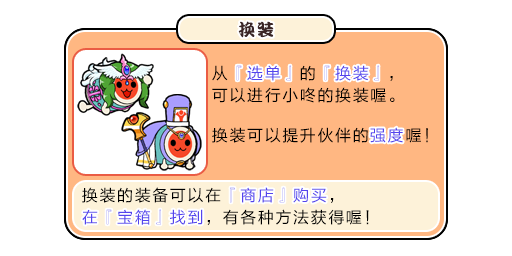
<style>
.page{position:relative;width:512px;height:256px;background:#ffffff}
.page>*{position:absolute;margin:0}
.t1{font:17px "DFPKanTingLiuW9";letter-spacing:0.1em;color:#3b2626}
.t2{font:16px/22px "FZLTHJW--GB1-0";letter-spacing:0.1em;color:#000000}
.t3{font:16px/22px "FZLTHJW--GB1-0";letter-spacing:0.1em;color:#5444ed}
.t4{font:16px "FZLTHJW--GB1-0";letter-spacing:0.1em;color:#5444ed}
.t5{font:16px "FZLTHJW--GB1-0";letter-spacing:0.1em;color:#000000}
</style>
<div class="page">
<p class="t1" style="left:238px;top:21px;width:36px;height:17px">换装</p>
<p class="t2" style="left:212px;top:65px;width:183px;height:38px">从<span class="t3">『选单』</span>的<span class="t3">『换装』</span>，<br>可以进行小咚的换装喔。</p>
<p class="t4" style="left:236px;top:65px;width:143px;height:16px">『选单』　『换装』</p>
<p class="t5" style="left:212px;top:127px;width:216px;height:16px">换装可以提升伙伴的<span class="t4">强度</span>喔！</p>
<p class="t4" style="left:370px;top:127px;width:33px;height:16px">强度</p>
<p class="t2" style="left:82px;top:187px;width:287px;height:38px">换装的装备可以在<span class="t3">『商店』购买</span>，<br><span class="t3">在『宝箱』找到</span>，有各种方法获得喔！</p>
<p class="t3" style="left:82px;top:187px;width:245px;height:38px"><span class="t2">　　　　　　　　</span>『商店』购买　　　<br>在『宝箱』找到</p>
</div>
